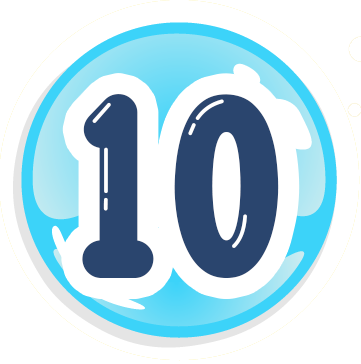
<style>
.page{position:relative;width:361px;height:364px;background:#ffffff}
.page>*{position:absolute;margin:0}
.t1{font:262.5px "BubbleBobble";color:#2a456e}
</style>
<div class="page">
<p class="t1" style="left:82px;top:94px;width:197px;height:184px">10</p>
</div>
